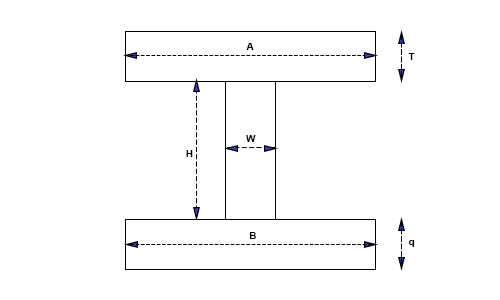
<style>
.page{position:relative;width:500px;height:300px;background:#ffffff}
.page>*{position:absolute;margin:0}
.t1{font:10px "Arial-BoldMT";color:#000000}
</style>
<div class="page">
<p class="t1" style="left:246px;top:43px;width:8px;height:7px">A</p>
<p class="t1" style="left:408px;top:53px;width:7px;height:7px">T</p>
<p class="t1" style="left:246px;top:135px;width:10px;height:7px">W</p>
<p class="t1" style="left:186px;top:150px;width:7px;height:7px">H</p>
<p class="t1" style="left:249px;top:232px;width:7px;height:7px">B</p>
<p class="t1" style="left:408px;top:240px;width:7px;height:7px">q</p>
</div>
